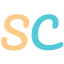
<style>
.page{position:relative;width:64px;height:64px;background:#ffffff}
.page>*{position:absolute;margin:0}
.t1{font:42px "Pacifico-Regular";color:#fbcc87}
.t2{font:42px "Pacifico-Regular";color:#53c9d7}
</style>
<div class="page">
<p class="t1" style="left:1px;top:14px;width:63px;height:37px">S<span class="t2">C</span></p>
</div>
